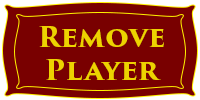
<style>
.page{position:relative;width:200px;height:100px;background:#790000}
.page>*{position:absolute;margin:0}
.t1{font:28px "TrajanPro3-Bold";color:#edd200}
</style>
<div class="page">
<p class="t1" style="left:39px;top:26px;width:125px;height:54px;text-align:center">Remove<br>Player</p>
</div>
